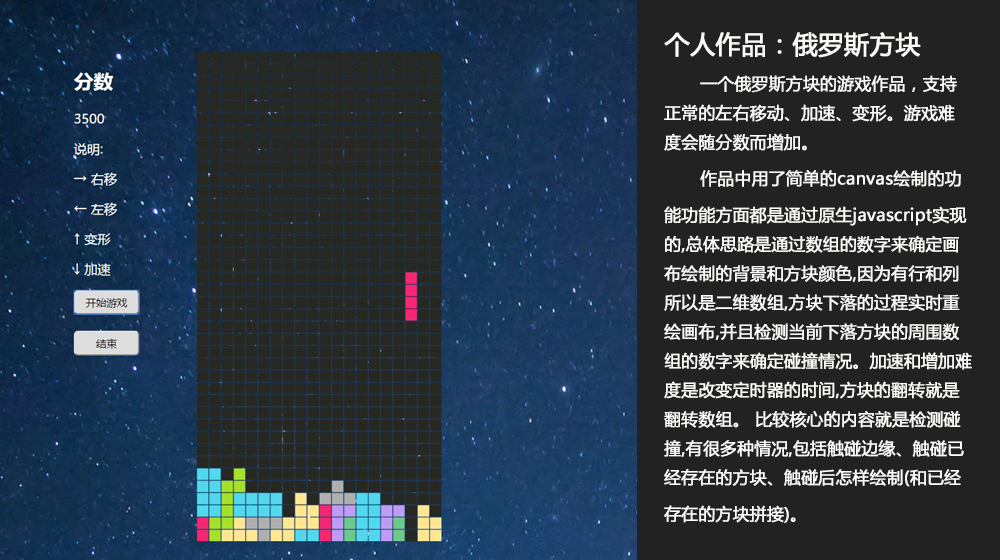
<style>
.page{position:relative;width:1000px;height:560px;background:#222222}
.page>*{position:absolute;margin:0}
.t1{font:16.7px "MicrosoftYaHei";color:#fbfbfa;font-weight:bold}
.t2{font:25px "MicrosoftYaHei";color:#fbfbfa;font-weight:bold}
</style>
<div class="page">
<p class="t1" style="left:664px;top:32px;width:308px;height:491px"><span class="t2">个人作品：俄罗斯方块<br> </span>一个俄罗斯方块的游戏作品，支持<br>正常的左右移动、加速、变形。游戏难<br>度会随分数而增加。<br> 作品中用了简单的canvas绘制的功<br>能功能方面都是通过原生javascript实现<br>的,总体思路是通过数组的数字来确定画<br>布绘制的背景和方块颜色,因为有行和列<br>所以是二维数组,方块下落的过程实时重<br>绘画布,并且检测当前下落方块的周围数<br>组的数字来确定碰撞情况。加速和增加难<br>度是改变定时器的时间,方块的翻转就是<br>翻转数组。 比较核心的内容就是检测碰<br>撞,有很多种情况,包括触碰边缘、触碰已<br>经存在的方块、触碰后怎样绘制(和已经<br>存在的方块拼接)。</p>
</div>
